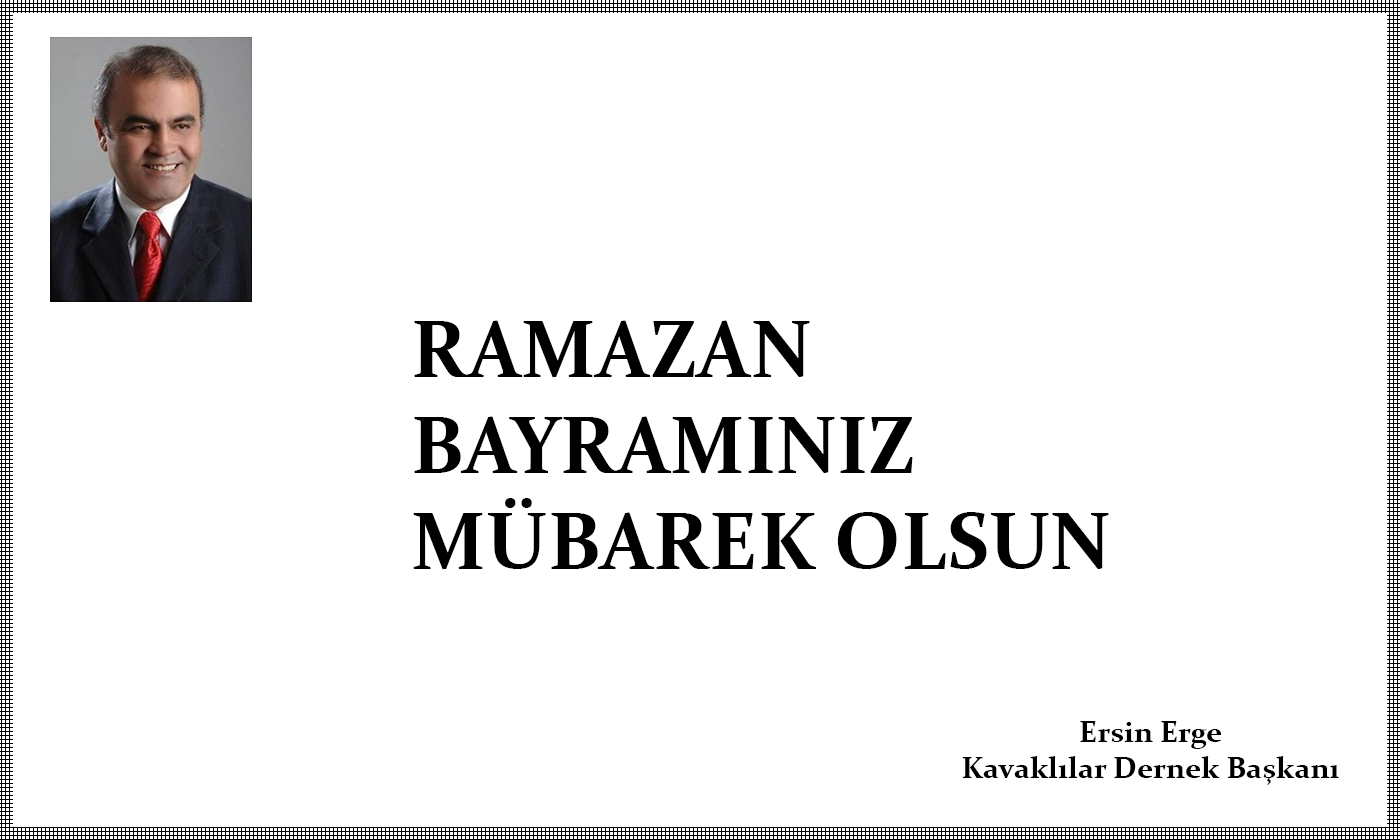
<style>
.page{position:relative;width:1400px;height:840px;background:#ffffff}
.page>*{position:absolute;margin:0}
.t1{font:80px "Constantia-Bold";color:#000000}
.t2{font:30px "Constantia-Bold";color:#000000}
</style>
<div class="page">
<p class="t1" style="left:413px;top:320px;width:696px;height:250px">RAMAZAN<br>BAYRAMINIZ<br>MÜBAREK OLSUN</p>
<p class="t2" style="left:962px;top:721px;width:377px;height:64px;text-align:center">Ersin Erge<br>Kavaklılar Dernek Başkanı</p>
</div>
